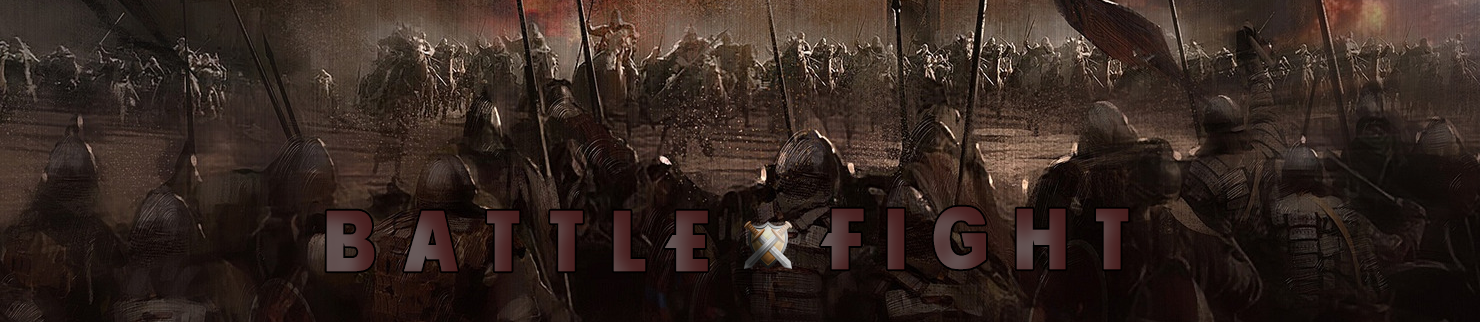
<style>
.page{position:relative;width:1480px;height:322px}
.page>*{position:absolute;margin:0}
.t1{font:150px "WRESTLEMANIA";color:#4f2e2e}
.t2{font:150px "WRESTLEMANIA";color:#4e2d2d}
</style>
<div class="page">
<p class="t1" style="left:820px;top:206px;width:309px;height:64px">F I G H T</p>
<p class="t2" style="left:326px;top:210px;width:382px;height:62px">B A T T L E</p>
</div>
